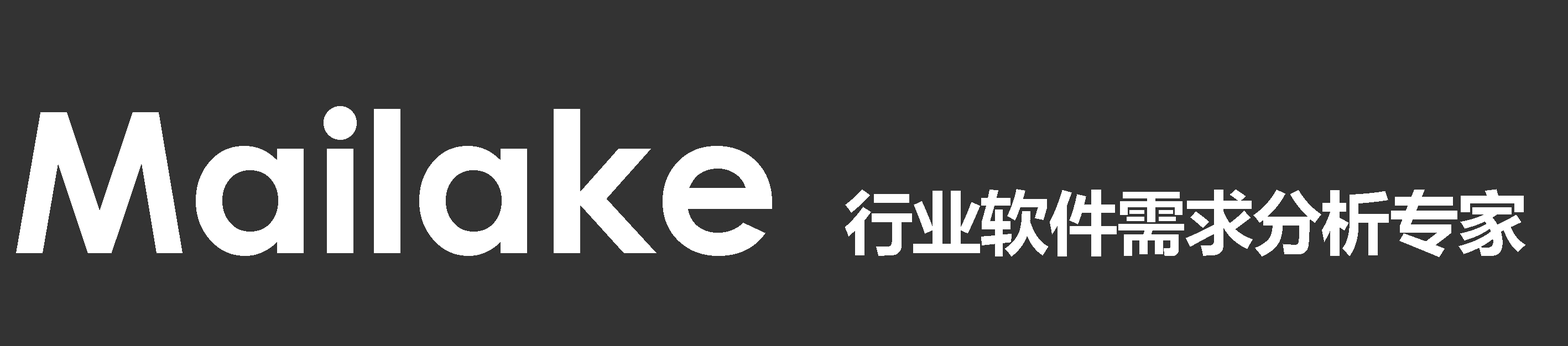
<style>
.page{position:relative;width:1568px;height:346px;background:#333333}
.page>*{position:absolute;margin:0}
.t1{font:196.4px "LevenimMT-Bold";color:#ffffff}
.t2{font:69.1px "MicrosoftYaHei-Bold";color:#ffffff}
</style>
<div class="page">
<p class="t1" style="left:16px;top:106px;width:756px;height:150px">Mailake</p>
<p class="t2" style="left:845px;top:189px;width:680px;height:68px">行业软件需求分析专家</p>
</div>
